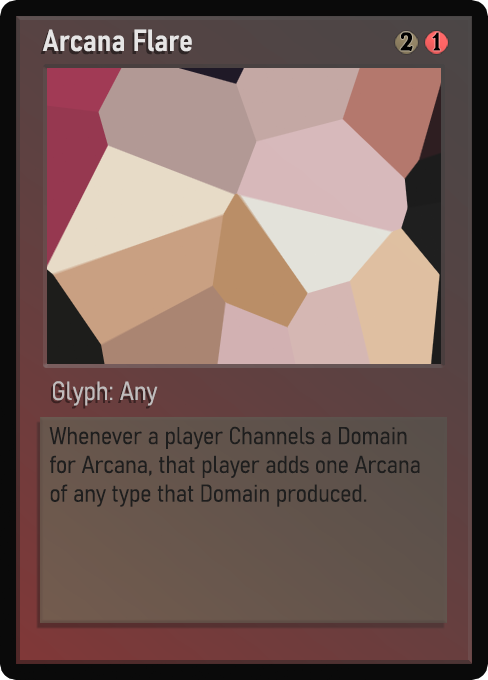
<style>
.page{position:relative;width:488px;height:680px}
.page>*{position:absolute;margin:0}
.t1{font:30px "Bahnschrift-SemiBoldSemiCondensed";color:#f2f2f2;font-weight:bold}
.t2{font:25px "WTRRoycroft";color:#000000;font-weight:bold;scale:1.09 1}
.t3{font:26px "Bahnschrift-LightSemiCondensed";color:#c8c8c8;font-weight:bold}
.t4{font:24px "Bahnschrift-LightSemiCondensed";color:#1e1e1e;font-weight:bold}
</style>
<div class="page">
<p class="t1" style="left:42px;top:29px;width:150px;height:23px;opacity:0.9">Arcana Flare</p>
<p class="t2" style="left:400px;top:32px;width:13px;height:19px">2</p>
<p class="t2" style="left:432px;top:32px;width:9px;height:19px">1</p>
<p class="t3" style="left:53px;top:381px;width:105px;height:25px;opacity:0.9">Glyph: Any</p>
<p class="t4" style="left:49px;top:426px;width:371px;height:81px">Whenever a player Channels a Domain for Arcana, that player adds one Arcana of any type that Domain produced.</p>
</div>
